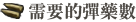
<style>
.page{position:relative;width:136px;height:22px;background:#ffffff}
.page>*{position:absolute;margin:0}
.t1{font:18px "RyuminPr6N-ExBold";color:#4b4742}
</style>
<div class="page">
<p class="t1" style="left:29px;top:2px;width:107px;height:18px">需要的彈藥數</p>
</div>
